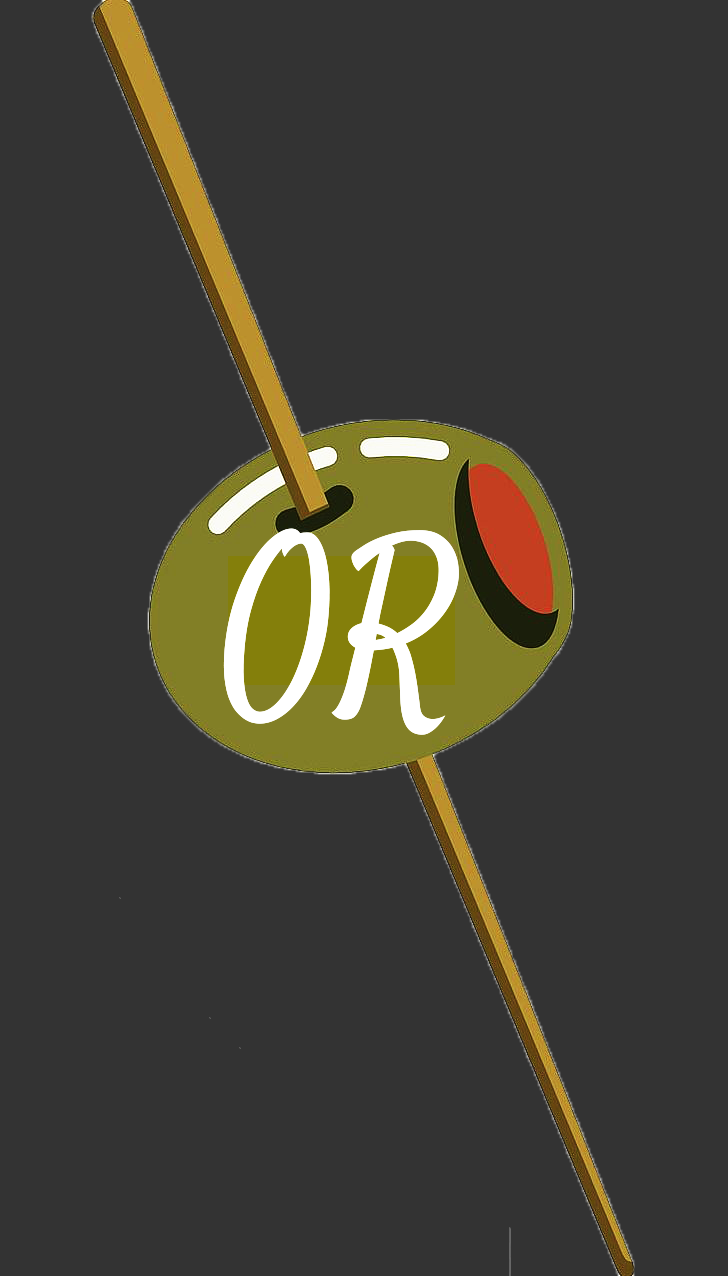
<style>
.page{position:relative;width:728px;height:1276px;background:#333333}
.page>*{position:absolute;margin:0}
.t1{font:207.6px "Satisfy-Regular";color:#fffffe}
</style>
<div class="page">
<p class="t1" style="left:223px;top:528px;width:236px;height:207px">OR</p>
</div>
